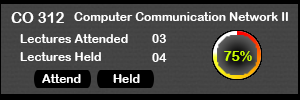
<style>
.page{position:relative;width:300px;height:100px}
.page>*{position:absolute;margin:0}
.t1{font:15px "ArialRoundedMTBold";color:#ffffff}
.t2{font:12px "ArialRoundedMTBold";color:#ffffff}
</style>
<div class="page">
<p class="t1" style="left:11px;top:12px;width:53px;height:11px">CO 312</p>
<p class="t2" style="left:74px;top:12px;width:214px;height:11px">Computer Communication Network II</p>
<p class="t2" style="left:20px;top:34px;width:108px;height:9px">Lectures Attended</p>
<p class="t2" style="left:152px;top:34px;width:14px;height:9px">03</p>
<p class="t2" style="left:20px;top:52px;width:81px;height:9px">Lectures Held</p>
<p class="t2" style="left:152px;top:53px;width:15px;height:9px">04</p>
<p class="t2" style="left:42px;top:74px;width:39px;height:9px">Attend</p>
<p class="t2" style="left:113px;top:74px;width:27px;height:9px">Held</p>
</div>
